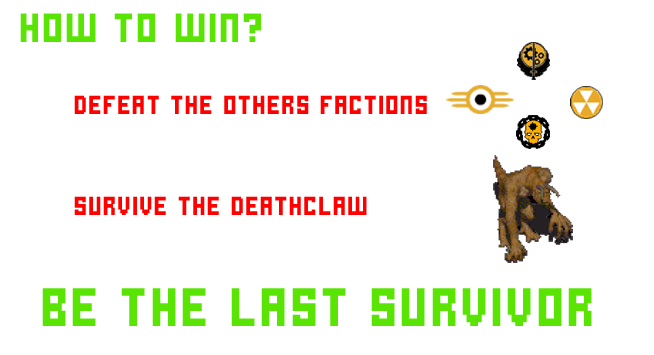
<style>
.page{position:relative;width:654px;height:355px;background:#ffffff}
.page>*{position:absolute;margin:0}
.t1{font:45.8px "MeatMadness";color:#59e404}
.t2{font:29.2px "MeatMadness";color:#ff0000}
.t3{font:60.6px "MeatMadness";color:#59e404}
</style>
<div class="page">
<p class="t1" style="left:20px;top:13px;width:241px;height:29px">hOW TO WIN?</p>
<p class="t2" style="left:74px;top:95px;width:353px;height:19px">dEFEAT THE OTHERS FACTIONS</p>
<p class="t2" style="left:74px;top:196px;width:293px;height:19px">Survive the Deathclaw</p>
<p class="t3" style="left:42px;top:288px;width:550px;height:38px">BE THE LAST SURVIVOR</p>
</div>
